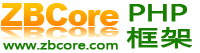
<style>
.page{position:relative;width:200px;height:53px;background:#ffffff}
.page>*{position:absolute;margin:0}
.t1{font:31px "Arial-Black";letter-spacing:-0.04em}
.t2{font:22.3px/24.2px "MicrosoftYaHei";letter-spacing:-0.04em;color:#187e00;font-weight:bold;scale:1.39 1}
.t3{font:22.3px/24.2px "MicrosoftYaHei";letter-spacing:0.08em;color:#187e00;font-weight:bold;scale:1.39 1}
.t4{font:18.5px "Arial-Black";letter-spacing:-0.04em;scale:1.68 1}
.t5{font:11.2px "MicrosoftYaHei";letter-spacing:-0.02em;color:#187e00;font-weight:bold;scale:1.25 1}
</style>
<div class="page">
<p class="t1" style="left:1px;top:3px;width:118px;height:23px">ZBCore</p>
<p class="t2" style="left:127px;top:4px;width:65px;height:45px">PHP<br><span class="t3">框架</span></p>
<p class="t4" style="left:1px;top:27px;width:118px;height:13px">ZBCore</p>
<p class="t5" style="left:3px;top:40px;width:115px;height:10px">www.zbcore.com</p>
</div>
